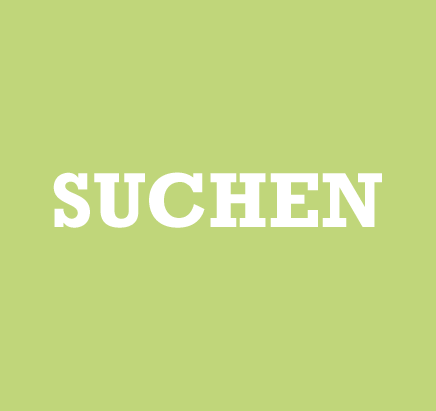
<style>
.page{position:relative;width:436px;height:411px;background:#c0d67a}
.page>*{position:absolute;margin:0}
.t1{font:79px "RockwellStd-Bold";color:#ffffff}
</style>
<div class="page">
<p class="t1" style="left:53px;top:172px;width:329px;height:56px">SUCHEN</p>
</div>
